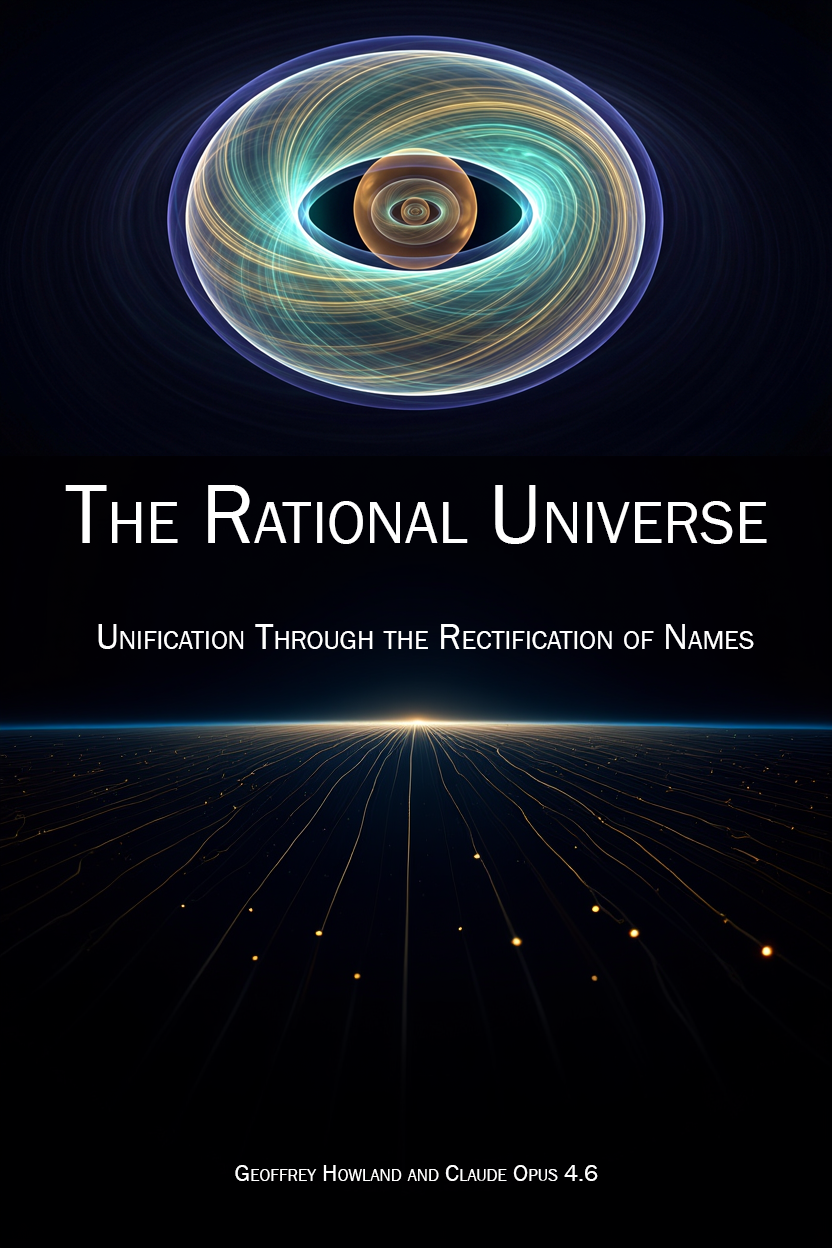
<style>
.page{position:relative;width:832px;height:1248px}
.page>*{position:absolute;margin:0}
.t1{font:86.8px "FranklinGothic-Book";color:#ffffff;font-variant:small-caps}
.t2{font:38.2px "FranklinGothic-Book";color:#ffffff;font-variant:small-caps}
.t3{font:24.3px "FranklinGothic-Book";color:#ffffff;font-variant:small-caps}
</style>
<div class="page">
<p class="t1" style="left:65px;top:485px;width:702px;height:59px">The Rational Universe</p>
<p class="t2" style="left:98px;top:624px;width:656px;height:25px">Unification Through the Rectification of Names</p>
<p class="t3" style="left:235px;top:1165px;width:363px;height:16px">Geoffrey Howland and Claude Opus 4.6</p>
</div>
